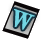
<style>
.page{position:relative;width:42px;height:40px;background:#ffffff}
.page>*{position:absolute;margin:0}
.t1{font:22px "RyuminPro-ExBold";color:#72d5e2;font-weight:bold}
</style>
<div class="page">
<p class="t1" style="left:14px;top:9px;width:21px;height:21px;rotate:19deg">W</p>
</div>
